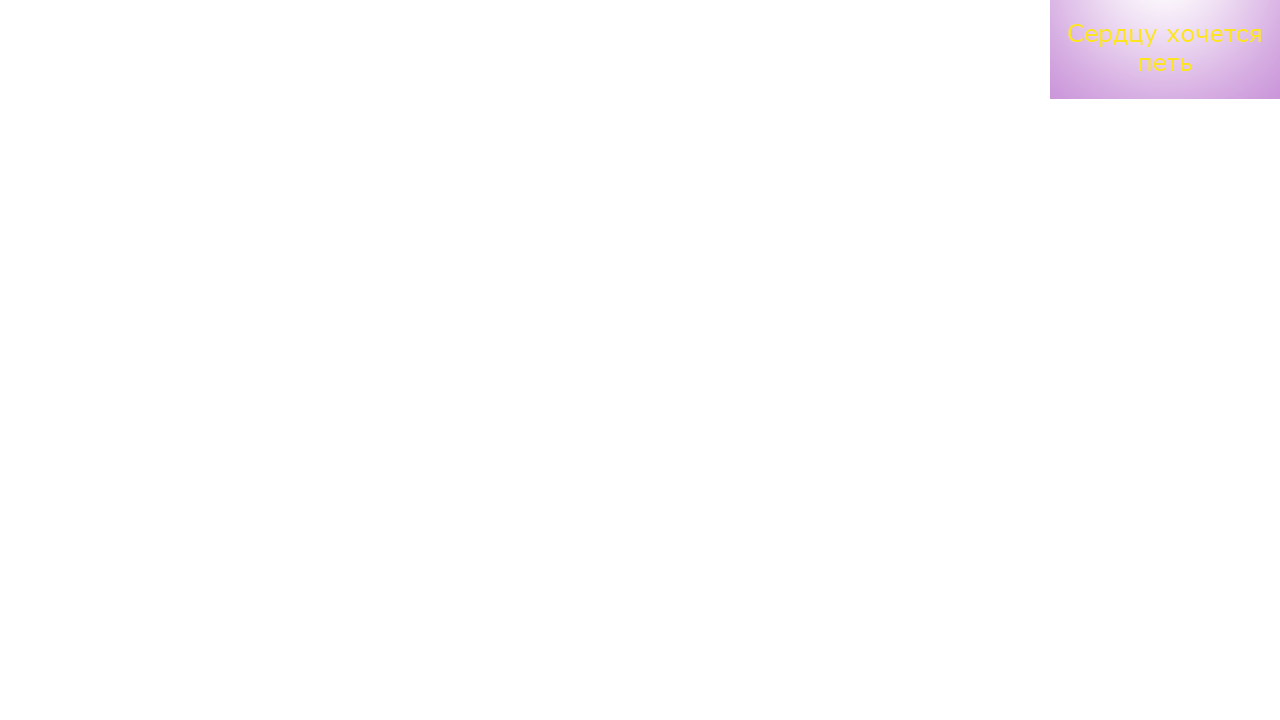
<style>
.page{position:relative;width:1280px;height:720px;background:#ffffff}
.page>*{position:absolute;margin:0}
.t1{font:24px "Verdana";color:#fce520}
.t2{font:18px "Verdana";color:#2935d9}
</style>
<div class="page">
<p class="t1" style="left:1068px;top:24px;width:193px;height:47px;text-align:center"><span class="t2"><br></span>Сердцу хочется петь</p>
</div>
